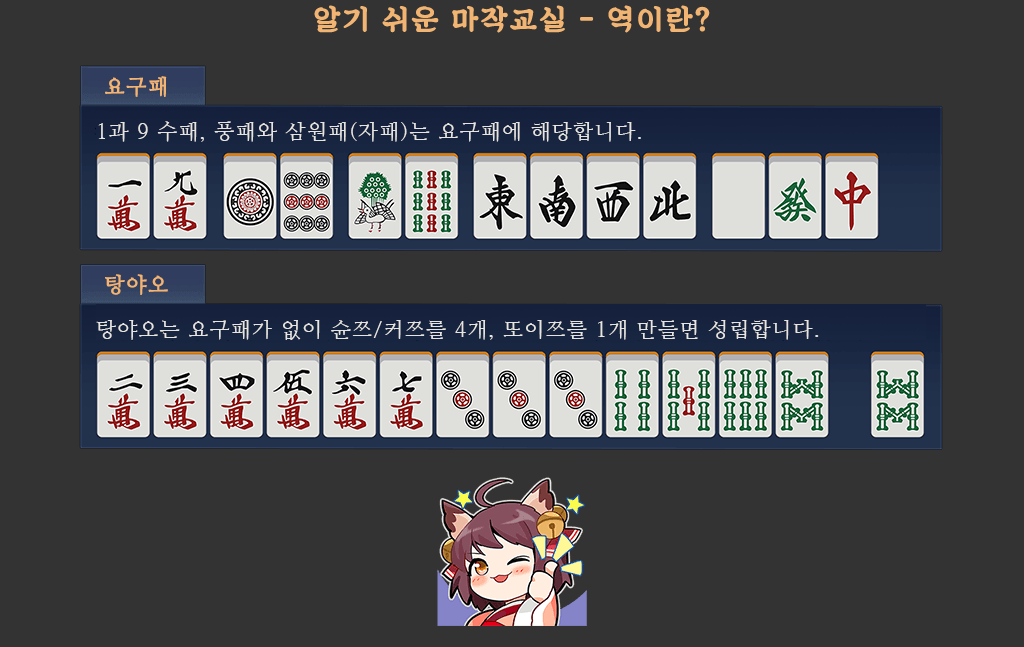
<style>
.page{position:relative;width:1024px;height:647px;background:#333333}
.page>*{position:absolute;margin:0}
.t1{font:29px "SDKukdetopokki-aLt";letter-spacing:0.06em;color:#f1b472;font-weight:bold}
.t2{font:21px "NanumMyeongjo";letter-spacing:0.06em;color:#f1b472;font-weight:bold}
.t3{font:21px "NanumMyeongjo";letter-spacing:0.06em;color:#e7e5e1}
</style>
<div class="page">
<p class="t1" style="left:314px;top:5px;width:396px;height:28px">알기 쉬운 마작교실 - 역이란?</p>
<p class="t2" style="left:105px;top:76px;width:62px;height:21px">요구패</p>
<p class="t3" style="left:98px;top:121px;width:543px;height:21px">1과 9 수패, 풍패와 삼원패(자패)는 요구패에 해당합니다.</p>
<p class="t2" style="left:105px;top:274px;width:63px;height:21px">탕야오</p>
<p class="t3" style="left:96px;top:320px;width:723px;height:20px">탕야오는 요구패가 없이 슌쯔/커쯔를 4개, 또이쯔를 1개 만들면 성립합니다.</p>
</div>
